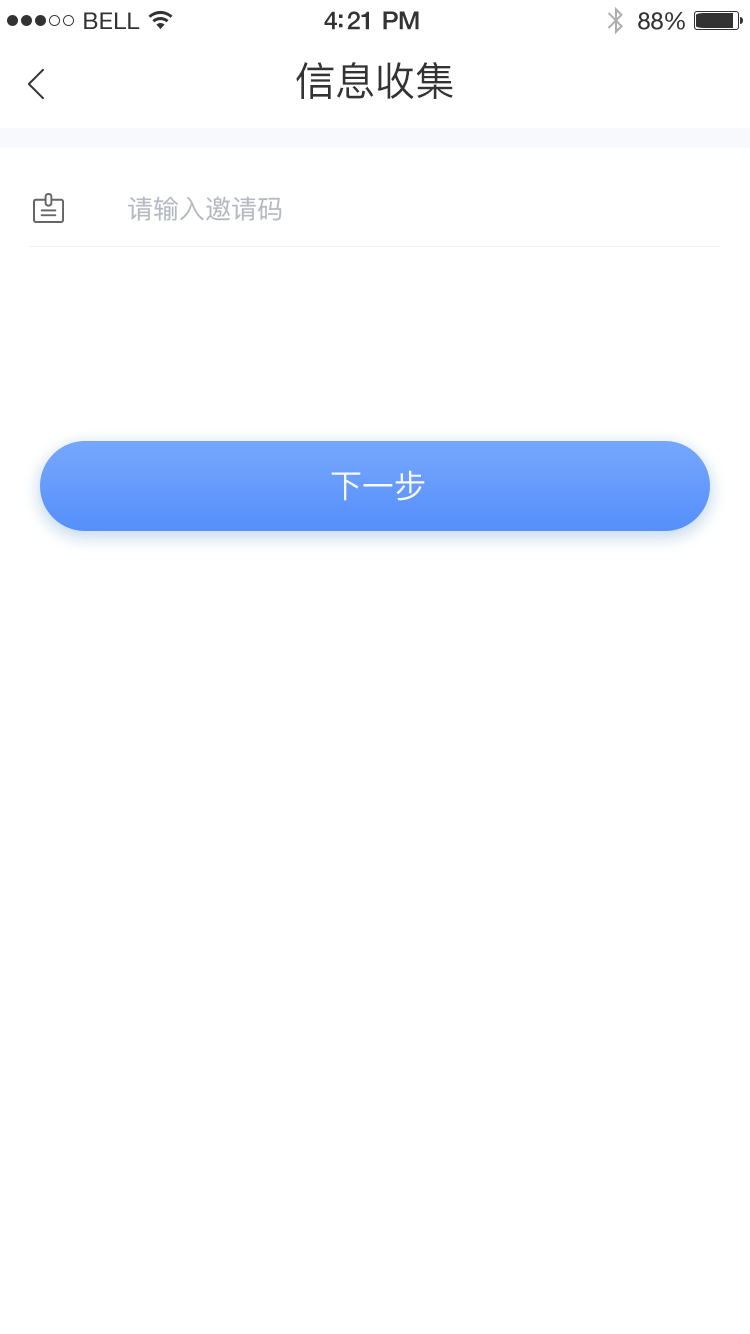
<style>
.page{position:relative;width:750px;height:1334px;background:#ffffff}
.page>*{position:absolute;margin:0}
.t1{font:23px "HelveticaNeue";letter-spacing:0.02em;color:#333333}
.t2{font:25px "HelveticaNeue-Medium";letter-spacing:-0.02em;color:#333333}
.t3{font:24px "HelveticaNeue";letter-spacing:-0.02em;color:#333333}
.t4{font:40px "PingFangSC-Regular";color:#333333}
.t5{font:26px "PingFangSC-Regular";color:#b5b9c2}
.t6{font:32px "PingFangSC-Regular";color:#f8f9fc}
</style>
<div class="page">
<p class="t1" style="left:84px;top:12px;width:56px;height:17px">BELL</p>
<p class="t2" style="left:324px;top:11px;width:95px;height:19px">4:21 PM</p>
<p class="t3" style="left:638px;top:12px;width:47px;height:18px">88%</p>
<p class="t4" style="left:296px;top:62px;width:157px;height:38px">信息收集</p>
<p class="t5" style="left:128px;top:196px;width:154px;height:25px">请输入邀请码</p>
<p class="t6" style="left:331px;top:470px;width:94px;height:31px">下一步</p>
</div>
